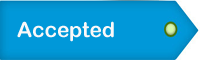
<style>
.page{position:relative;width:200px;height:60px;background:#0098d9}
.page>*{position:absolute;margin:0}
.t1{font:20.9px "ArialRoundedMTBold";color:#fbf8f8}
</style>
<div class="page">
<p class="t1" style="left:17px;top:21px;width:97px;height:21px">Accepted</p>
</div>
